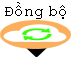
<style>
.page{position:relative;width:71px;height:58px;background:#ffffff}
.page>*{position:absolute;margin:0}
.t1{font:16px "CourierNewPSMT";color:#000000}
</style>
<div class="page">
<p class="t1" style="left:5px;top:2px;width:61px;height:17px">Đồng bộ</p>
</div>
